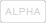
<style>
.page{position:relative;width:46px;height:23px;background:#ffffff}
.page>*{position:absolute;margin:0}
.t1{font:10px "ArialMT";letter-spacing:0.06em;color:#d4d4d4}
</style>
<div class="page">
<p class="t1" style="left:5px;top:8px;width:36px;height:7px">ALPHA</p>
</div>
